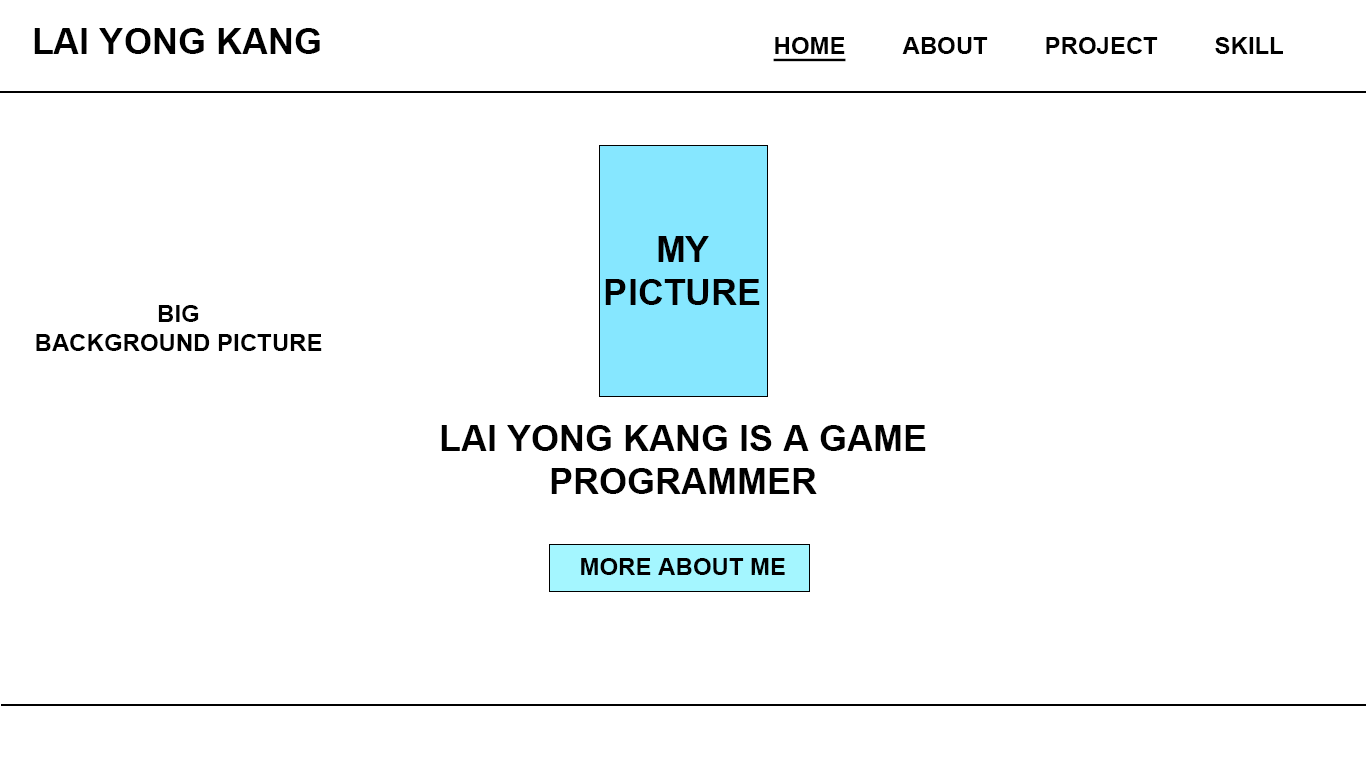
<style>
.page{position:relative;width:1366px;height:768px;background:#ffffff}
.page>*{position:absolute;margin:0}
.t1{font:36px "Arial-BoldMT";color:#000000}
.t2{font:24px "Arial-BoldMT";color:#000000;text-decoration:underline}
.t3{font:24px "Arial-BoldMT";color:#000000}
</style>
<div class="page">
<p class="t1" style="left:34px;top:28px;width:286px;height:26px">LAI YONG KANG</p>
<p class="t2" style="left:773px;top:37px;width:73px;height:25px">HOME</p>
<p class="t3" style="left:902px;top:37px;width:86px;height:17px">ABOUT</p>
<p class="t3" style="left:1046px;top:37px;width:112px;height:17px">PROJECT</p>
<p class="t3" style="left:1215px;top:37px;width:68px;height:17px">SKILL</p>
<p class="t1" style="left:605px;top:236px;width:155px;height:69px;text-align:center">MY<br>PICTURE</p>
<p class="t3" style="left:36px;top:305px;width:286px;height:46px;text-align:center">BIG<br>BACKGROUND PICTURE</p>
<p class="t1" style="left:441px;top:425px;width:485px;height:69px;text-align:center">LAI YONG KANG IS A GAME PROGRAMMER</p>
<p class="t3" style="left:581px;top:558px;width:204px;height:17px">MORE ABOUT ME</p>
</div>
